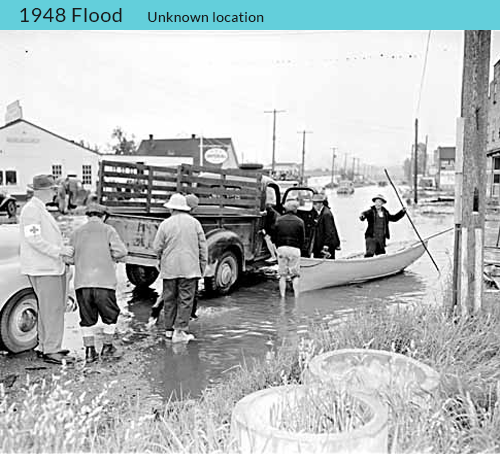
<style>
.page{position:relative;width:500px;height:454px}
.page>*{position:absolute;margin:0}
.t1{font:20px "Lato-Regular";letter-spacing:0.025em;color:#1a1a1a}
.t2{font:14px "Lato-Regular";letter-spacing:0.025em;color:#1a1a1a}
</style>
<div class="page">
<p class="t1" style="left:20px;top:8px;width:102px;height:14px">1948 Flood</p>
<p class="t2" style="left:148px;top:12px;width:116px;height:10px">Unknown location</p>
</div>
